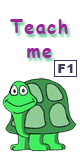
<style>
.page{position:relative;width:80px;height:160px;background:#ffffff}
.page>*{position:absolute;margin:0}
.t1{font:18.1px/24px "ComicSansMS-Bold";letter-spacing:0.075em;color:#982797}
.t2{font:12px "Arial-Black";letter-spacing:0.075em;color:#3d375c}
</style>
<div class="page">
<p class="t1" style="left:10px;top:19px;width:58px;height:39px;text-align:center">Teach<br>me</p>
<p class="t2" style="left:58px;top:64px;width:15px;height:9px">F1</p>
</div>
